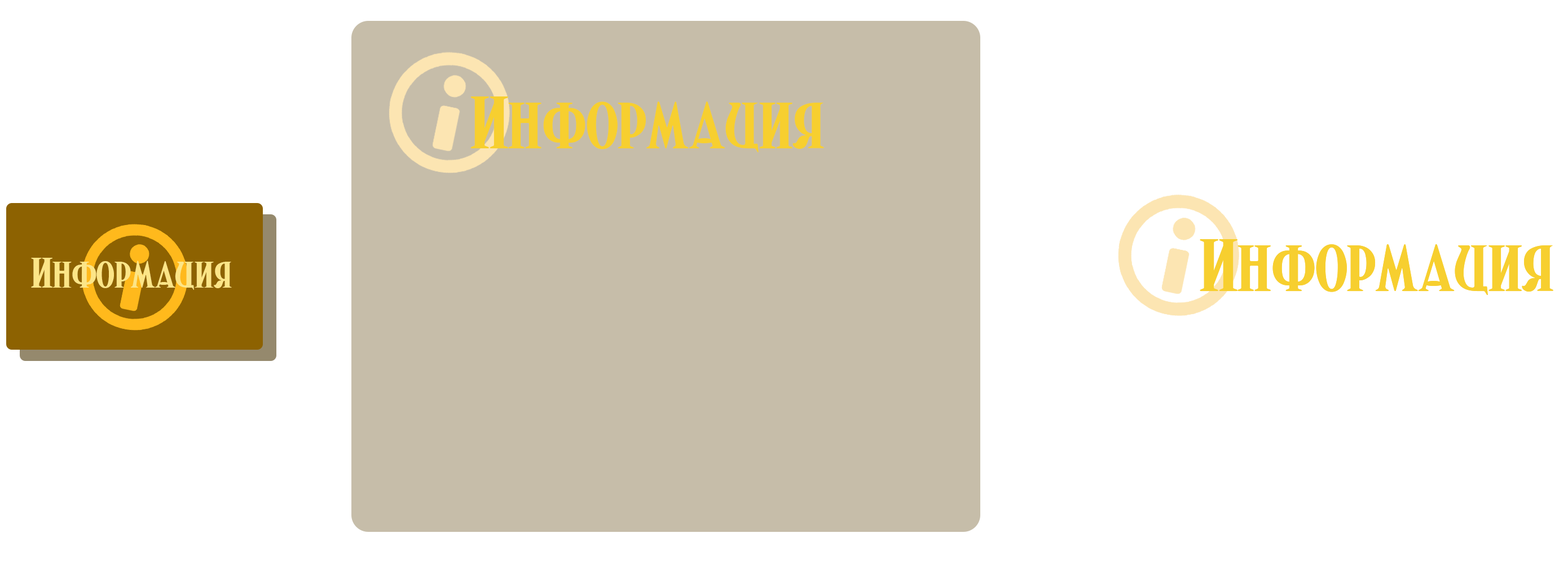
<style>
.page{position:relative;width:1568px;height:564px;background:#ffffff}
.page>*{position:absolute;margin:0}
.t1{font:74.6px "MoriceBejar";color:#f7cf2f}
.t2{font:42.3px "MoriceBejar";color:#fce587}
</style>
<div class="page">
<p class="t1" style="left:470px;top:96px;width:354px;height:56px">Информация</p>
<p class="t1" style="left:1200px;top:239px;width:353px;height:56px">Информация</p>
<p class="t2" style="left:31px;top:258px;width:201px;height:32px">Информация</p>
</div>
